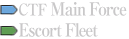
<style>
.page{position:relative;width:129px;height:39px;background:#ffffff}
.page>*{position:absolute;margin:0}
.t1{font:18px/21px "RyuminPro-ExBold";letter-spacing:-0.08em;color:#c9c8c9;scale:0.9 1}
.t2{font:16px/21px "RyuminPro-ExBold";letter-spacing:-0.08em;color:#c9c8c9;scale:0.9 1}
</style>
<div class="page">
<p class="t1" style="left:19px;top:2px;width:108px;height:35px"><span class="t2">CTF</span> Main Force<br>Escort Fleet</p>
</div>
